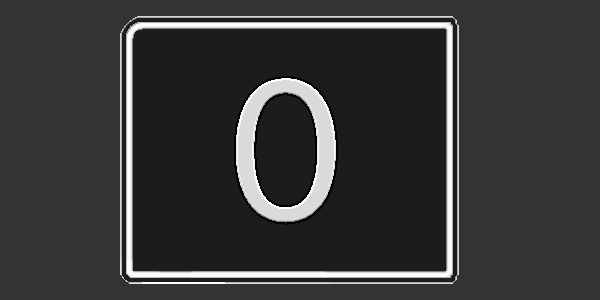
<style>
.page{position:relative;width:600px;height:300px;background:#333333}
.page>*{position:absolute;margin:0}
.t1{font:220px "Carlito";color:#dbdad8}
</style>
<div class="page">
<p class="t1" style="left:236px;top:78px;width:100px;height:145px">0</p>
</div>
